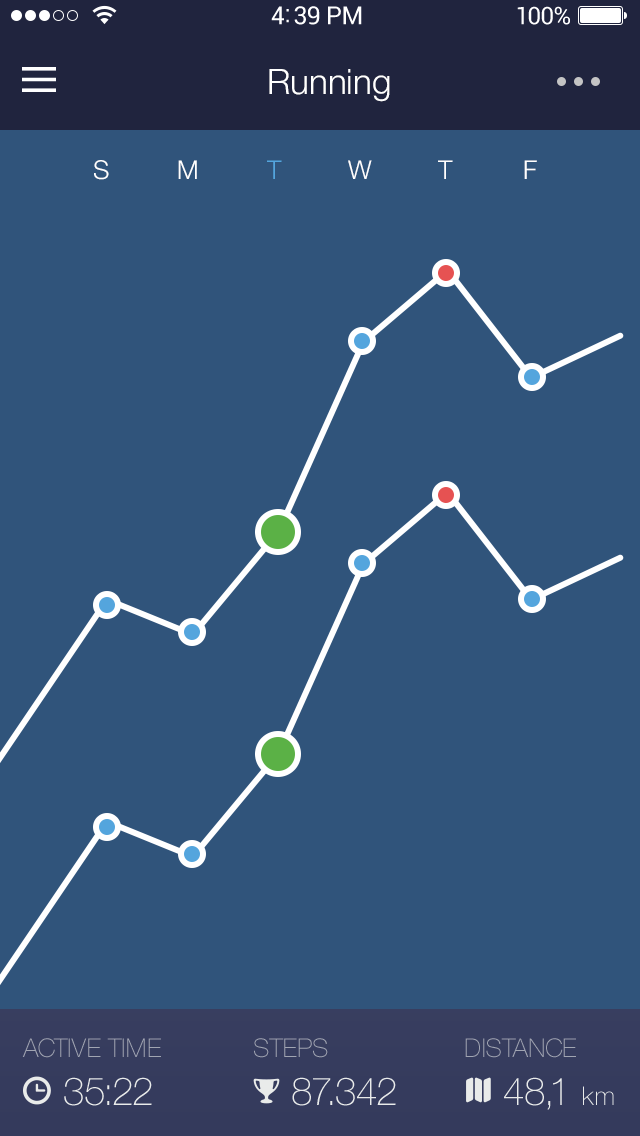
<style>
.page{position:relative;width:640px;height:1136px;background:#30547b}
.page>*{position:absolute;margin:0}
.t1{font:35px "HelveticaNeue-Light";color:#ffffff}
.t2{font:26px "HelveticaNeue-Light";color:#ffffff;text-transform:uppercase}
.t3{font:26px "HelveticaNeue-Light";color:#54a5dd;text-transform:uppercase}
.t4{font:25.8px "HelveticaNeue-Thin";color:#a1a5b2;text-transform:uppercase}
.t5{font:38.6px "HelveticaNeue-Thin";color:#e9ebea}
.t6{font:25.8px "HelveticaNeue-Thin";color:#e9ebea}
</style>
<div class="page">
<p class="t1" style="left:269px;top:69px;width:121px;height:33px">Running</p>
<p class="t2" style="left:94px;top:160px;width:15px;height:20px">s</p>
<p class="t2" style="left:178px;top:160px;width:19px;height:19px">m</p>
<p class="t3" style="left:267px;top:160px;width:15px;height:19px">t</p>
<p class="t2" style="left:348px;top:160px;width:24px;height:19px">w</p>
<p class="t2" style="left:438px;top:160px;width:15px;height:19px">t</p>
<p class="t2" style="left:524px;top:160px;width:13px;height:19px">f</p>
<p class="t4" style="left:22px;top:1038px;width:139px;height:20px">active time</p>
<p class="t4" style="left:254px;top:1038px;width:74px;height:20px">steps</p>
<p class="t4" style="left:465px;top:1038px;width:111px;height:20px">distance</p>
<p class="t5" style="left:64px;top:1077px;width:88px;height:29px">35:22</p>
<p class="t5" style="left:292px;top:1077px;width:104px;height:29px">87.342</p>
<p class="t5" style="left:504px;top:1077px;width:110px;height:33px">48,1 <span class="t6">km</span></p>
</div>
